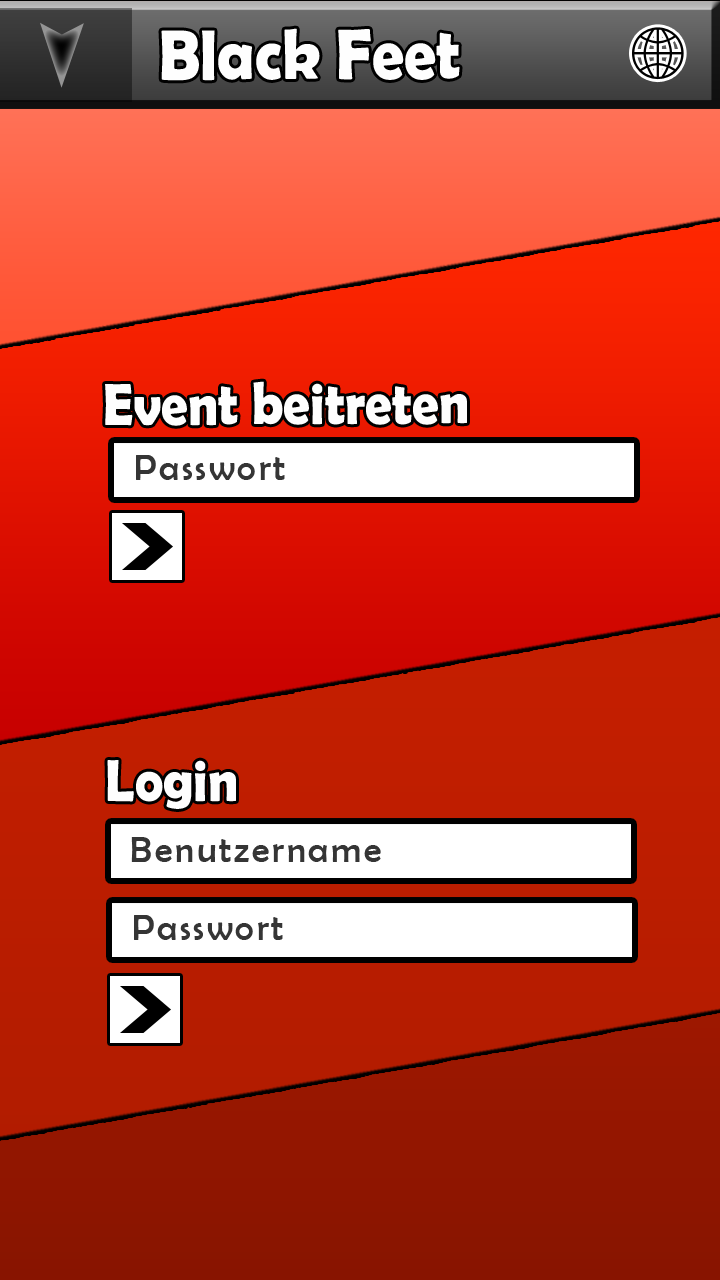
<style>
.page{position:relative;width:720px;height:1280px}
.page>*{position:absolute;margin:0}
.t1{font:72px "BerlinSansFBDemi-Bold";color:#fefefe;scale:0.89 1}
.t2{font:60px "BerlinSansFBDemi-Bold";color:#fefefe;scale:0.89 1}
.t3{font:36px "BerlinSansFB-Reg";letter-spacing:0.075em;color:#353535}
</style>
<div class="page">
<p class="t1" style="left:161px;top:28px;width:299px;height:53px">Black Feet</p>
<p class="t2" style="left:105px;top:381px;width:362px;height:45px">Event beitreten</p>
<p class="t3" style="left:136px;top:455px;width:149px;height:25px">Passwort</p>
<p class="t2" style="left:107px;top:760px;width:129px;height:49px">Login</p>
<p class="t3" style="left:131px;top:837px;width:250px;height:25px">Benutzername</p>
<p class="t3" style="left:134px;top:915px;width:149px;height:25px">Passwort</p>
</div>
